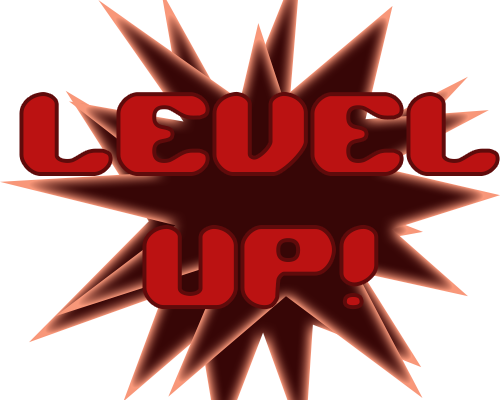
<style>
.page{position:relative;width:500px;height:400px;background:#ffffff}
.page>*{position:absolute;margin:0}
.t1{font:111.1px "JawbreakerBRK";color:#c50202}
</style>
<div class="page">
<p class="t1" style="left:23px;top:95px;width:473px;height:211px;text-align:center">LEVEL<br>UP!</p>
</div>
